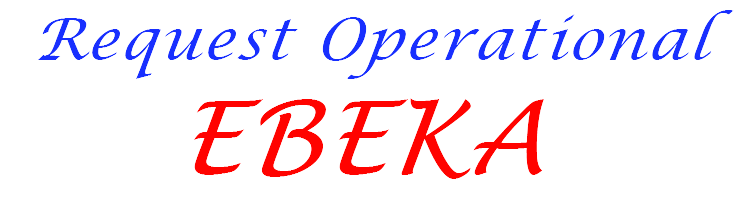
<style>
.page{position:relative;width:750px;height:200px;background:#ffffff}
.page>*{position:absolute;margin:0}
.t1{font:58.3px "LucidaCalligraphy-Italic";letter-spacing:0.039em;color:#172eff;font-style:italic}
.t2{font:100px "LucidaHandwriting-Italic";letter-spacing:0.039em;color:#ff0200;font-style:italic}
</style>
<div class="page">
<p class="t1" style="left:38px;top:10px;width:696px;height:69px">Request Operational</p>
<p class="t2" style="left:193px;top:98px;width:351px;height:81px">EBEKA</p>
</div>
